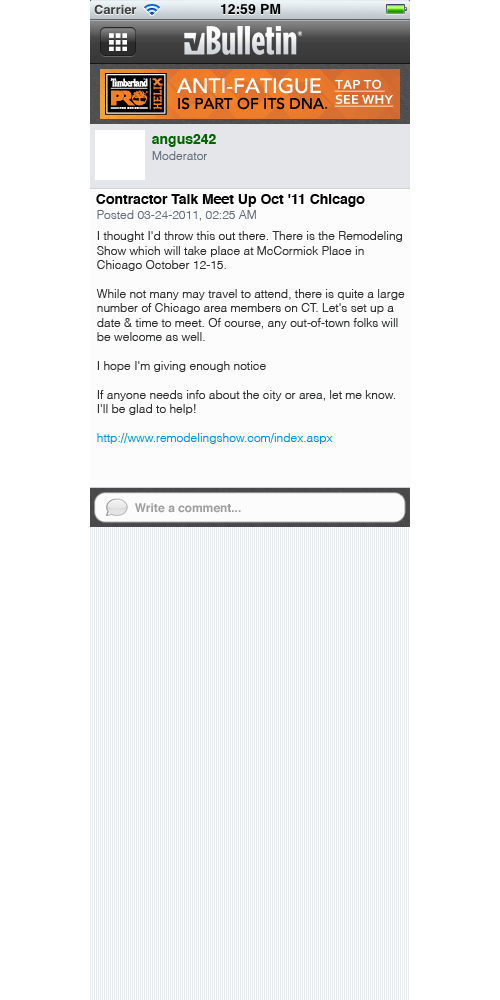
<style>
.page{position:relative;width:500px;height:1000px;background:#ffffff}
.page>*{position:absolute;margin:0}
.t1{font:14px "Helvetica-Bold";color:#006600}
.t2{font:12px "Helvetica-Light";color:#676f7e}
.t3{font:14px "Helvetica-Bold";color:#000000}
.t4{font:12px "Helvetica-Light";color:#2e2f2f}
.t5{font:12px "Helvetica-Light";color:#0095e4}
.t6{font:12px "Helvetica-Bold";color:#9f9f9f}
</style>
<div class="page">
<p class="t1" style="left:152px;top:134px;width:64px;height:13px">angus242</p>
<p class="t2" style="left:152px;top:151px;width:55px;height:9px">Moderator</p>
<p class="t3" style="left:96px;top:194px;width:269px;height:13px">Contractor Talk Meet Up Oct '11 Chicago</p>
<p class="t2" style="left:97px;top:210px;width:159px;height:11px">Posted 03-24-2011, 02:25 AM</p>
<p class="t4" style="left:96px;top:231px;width:309px;height:213px">I thought I'd throw this out there. There is the Remodeling<br>Show which will take place at McCormick Place in<br>Chicago October 12-15. <br><br>While not many may travel to attend, there is quite a large<br>number of Chicago area members on CT. Let's set up a <br>date &amp; time to meet. Of course, any out-of-town folks will <br>be welcome as well.<br><br>I hope I'm giving enough notice <br><br>If anyone needs info about the city or area, let me know.<br>I'll be glad to help!<br><br><span class="t5">http://www.remodelingshow.com/index.aspx</span></p>
<p class="t6" style="left:135px;top:503px;width:106px;height:10px">Write a comment...</p>
</div>
